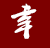
<style>
.page{position:relative;width:50px;height:48px;background:#7d0000}
.page>*{position:absolute;margin:0}
.t1{font:32.4px "Ò¶¸ùÓÑÃ«±ÊÐÐÊé¼òÌå";letter-spacing:0.2em;color:#ffffff}
</style>
<div class="page">
<p class="t1" style="left:11px;top:3px;width:26px;height:36px">幸</p>
</div>
